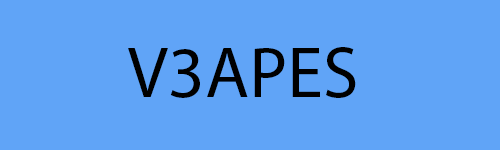
<style>
.page{position:relative;width:500px;height:150px;background:#60a4f7}
.page>*{position:absolute;margin:0}
.t1{font:72px "MyriadPro-Regular";color:#000000}
</style>
<div class="page">
<p class="t1" style="left:128px;top:47px;width:228px;height:51px">V3APES</p>
</div>
